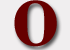
<style>
.page{position:relative;width:70px;height:50px;background:#f0eeef}
.page>*{position:absolute;margin:0}
.t1{font:65.4px "Titania";letter-spacing:-0.05em;color:#660000}
</style>
<div class="page">
<p class="t1" style="left:14px;top:0px;width:43px;height:47px">O</p>
</div>
